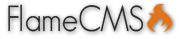
<style>
.page{position:relative;width:179px;height:39px;background:#ffffff}
.page>*{position:absolute;margin:0}
.t1{font:35.5px "GeosansLight";color:#272727;scale:0.91 1}
</style>
<div class="page">
<p class="t1" style="left:8px;top:4px;width:136px;height:28px">FlameCMS</p>
</div>
